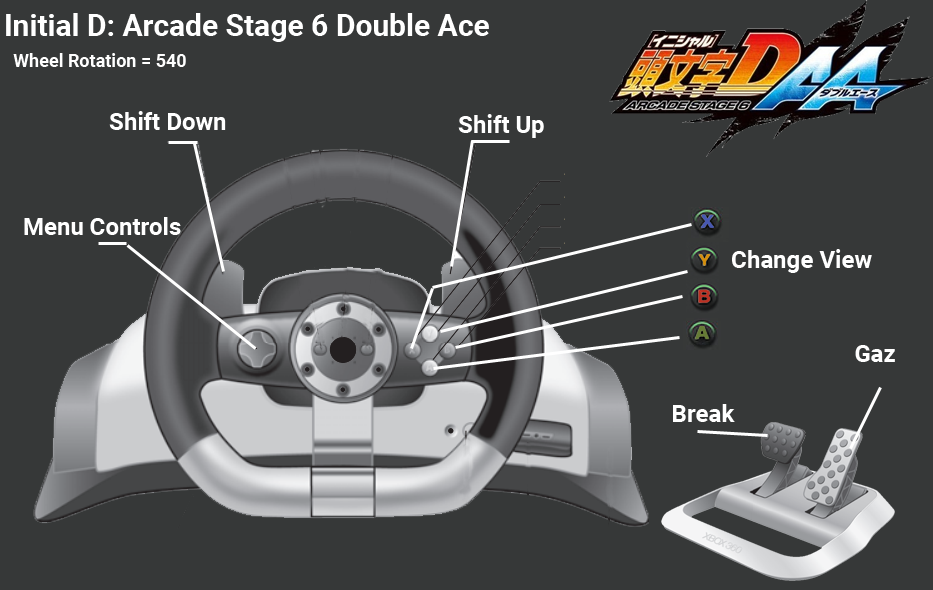
<style>
.page{position:relative;width:933px;height:590px;background:#363838}
.page>*{position:absolute;margin:0}
.t1{font:30px "Roboto-Bold";color:#ffffff}
.t2{font:18px "Roboto-Bold";color:#ffffff}
.t3{font:24px "Roboto-Bold";color:#ffffff}
</style>
<div class="page">
<p class="t1" style="left:6px;top:13px;width:483px;height:29px">Initial D: Arcade Stage 6 Double Ace</p>
<p class="t2" style="left:13px;top:53px;width:173px;height:14px">Wheel Rotation = 540</p>
<p class="t3" style="left:109px;top:111px;width:117px;height:19px">Shift Down</p>
<p class="t3" style="left:458px;top:114px;width:86px;height:24px">Shift Up</p>
<p class="t3" style="left:24px;top:217px;width:157px;height:18px">Menu Controls</p>
<p class="t3" style="left:732px;top:249px;width:140px;height:24px">Change View</p>
<p class="t3" style="left:855px;top:345px;width:40px;height:17px">Gaz</p>
<p class="t3" style="left:673px;top:404px;width:62px;height:18px">Break</p>
</div>
